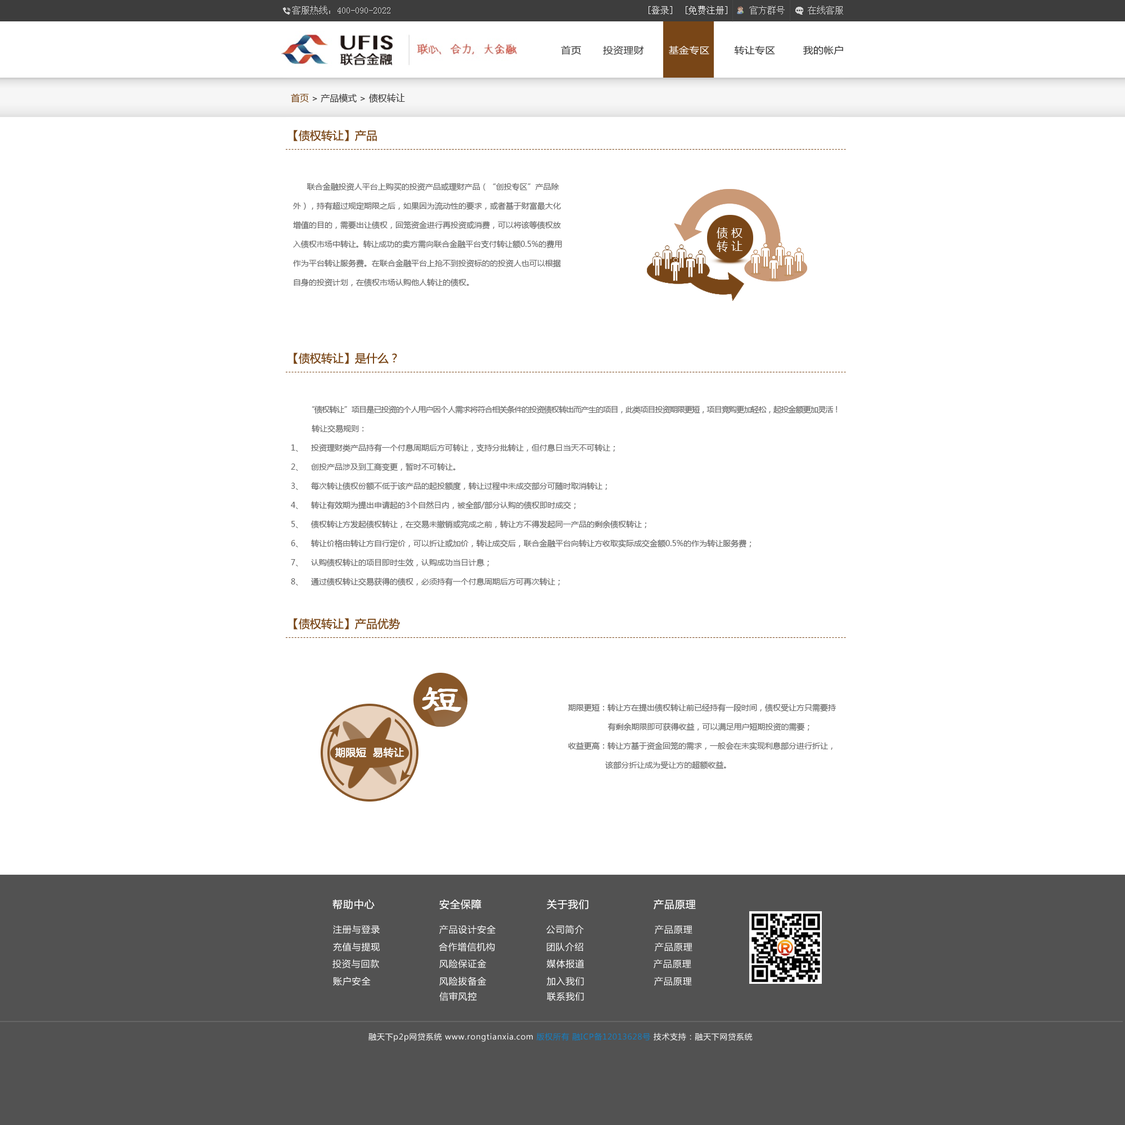
<style>
.page{position:relative;width:1125px;height:1125px;background:#ffffff}
.page>*{position:absolute;margin:0}
.t1{font:9px "SimSun";color:#d6d6d6}
.t2{font:9px "SimSun";color:#fefefe}
.t3{font:9px "SimSun";color:#fffefe}
.t4{font:9.1px "MicrosoftYaHei";letter-spacing:0.01em;color:#333333;scale:1.11 1}
.t5{font:9.1px "MicrosoftYaHei";letter-spacing:0.01em;color:#fffefe;scale:1.11 1}
.t6{font:9px "MicrosoftYaHei";color:#3b3a3a}
.t7{font:9px "MicrosoftYaHei";color:#794617}
.t8{font:11.2px "MicrosoftYaHei";color:#794617}
.t9{font:7.9px/19.1px "MicrosoftYaHei";color:#666666}
.t10{font:7.9px/19.1px "MicrosoftYaHei";letter-spacing:-0.04em;color:#666666}
.t11{font:11.2px/13.5px "MicrosoftYaHei";color:#ffffff}
.t12{font:7.9px/19.1px "MicrosoftYaHei";letter-spacing:-0.06em;color:#666666}
.t13{font:39.4px "-G-l-e-i-0-0-b";color:#ffffff;font-weight:bold}
.t14{font:10.1px "MicrosoftYaHei";color:#ffffff;font-weight:bold}
.t15{font:10.1px "MicrosoftYaHei";letter-spacing:0.05em;color:#ffffff}
.t16{font:9px "MicrosoftYaHei";letter-spacing:0.05em;color:#ffffff}
.t17{font:7.9px "MicrosoftYaHei";letter-spacing:0.05em;color:#ffffff}
.t18{font:7.9px "MicrosoftYaHei";letter-spacing:0.05em;color:#147fc3}
</style>
<div class="page">
<p class="t1" style="left:292px;top:6px;width:98px;height:9px">客服热线：400-090-2022</p>
<p class="t2" style="left:649px;top:6px;width:23px;height:9px">[登录]</p>
<p class="t3" style="left:686px;top:6px;width:41px;height:9px">[免费注册]</p>
<p class="t1" style="left:749px;top:6px;width:94px;height:9px">官方群号     在线客服</p>
<p class="t4" style="left:561px;top:46px;width:282px;height:9px">首页       投资理财        <span class="t5">基金专区</span>        转让专区         我的帐户</p>
<p class="t6" style="left:291px;top:93px;width:114px;height:10px"><span class="t7">首页 </span>&gt; 产品模式 &gt; 债权转让</p>
<p class="t8" style="left:294px;top:130px;width:83px;height:11px">【债权转让】产品</p>
<p class="t9" style="left:293px;top:183px;width:269px;height:104px">联合金融投资人平台上购买的投资产品或理财产品（“创投专区”产品除<br>外），持有超过规定期限之后，如果因为流动性的要求，或者基于财富最大化<br>增值的目的，需要出让债权，回笼资金进行再投资或消费，可以将该等债权放<br>入债权市场中转<span class="t10">让。转</span>让成功的卖方需向联合金融平台支付转让额0.5%的费用<br>作为平台转让服务费。在联合金融平台上抢不到投资标的的投资人也可以根据<br>自身的投资计划，在债权市场认购他人转让的债权。</p>
<p class="t11" style="left:717px;top:227px;width:25px;height:25px">债 权<br>转 让</p>
<p class="t8" style="left:294px;top:353px;width:103px;height:11px">【债权转让】是什么？</p>
<p class="t9" style="left:291px;top:406px;width:547px;height:180px"><span class="t12">“债权转让”项目是已投资的个人用户因个人需求将符合相关条件的投资债权转出而产生的项目，此类项目投资期限更短，项目竞购更加轻松，起投金额更加灵活！<br></span>         转让交易规则：<br>1、 投资理财类产品持有一个付息周期后方可转让，支持分批转让，但付息日当天不可转让；<br>2、 创投产品涉及到工商变更，暂时不可转让。<br>3、 每次转让债权份额不低于该产品的起投额度，转让过程中未成交部分可随时取消转让；<br>4、 转让有效期为提出申请起的3个自然日内，被全部/部分认购的债权即时成交；<br>5、 债权转让方发起债权转让，在交易未撤销或完成之前，转让方不得发起同一产品的剩余债权转让；<br>6、 转让价格由转让方自行定价，可以折让或加价，转让成交后，联合金融平台向转让方收取实际成交金额0.5%的作为转让服务费；<br>7、 认购债权转让的项目即时生效，认购成功当日计息；<br>8、 通过债权转让交易获得的债权，必须持有一个付息周期后方可再次转让；</p>
<p class="t8" style="left:294px;top:618px;width:106px;height:11px">【债权转让】产品优势</p>
<p class="t13" style="left:422px;top:687px;width:39px;height:25px">短</p>
<p class="t9" style="left:568px;top:704px;width:268px;height:66px">期限更短：转让方在提出债权转让前已经持有一段时间，债权受让方只需要持<br>                 有剩余期限即可获得收益，可以满足用户短期投资的需要；<br>收益更高：转让方基于资金回笼的需求，一般会在未实现利息部分进行折让，<br>                该部分折让成为受让方的超额收益。</p>
<p class="t14" style="left:335px;top:747px;width:69px;height:11px">期限短  易转让</p>
<p class="t15" style="left:332px;top:899px;width:43px;height:11px">帮助中心</p>
<p class="t15" style="left:439px;top:899px;width:43px;height:11px">安全保障</p>
<p class="t15" style="left:547px;top:899px;width:41px;height:11px">关于我们</p>
<p class="t15" style="left:654px;top:899px;width:42px;height:11px">产品原理</p>
<p class="t16" style="left:333px;top:925px;width:47px;height:9px">注册与登录</p>
<p class="t16" style="left:439px;top:925px;width:57px;height:9px">产品设计安全</p>
<p class="t16" style="left:546px;top:925px;width:38px;height:9px">公司简介</p>
<p class="t16" style="left:655px;top:925px;width:37px;height:9px">产品原理</p>
<p class="t16" style="left:333px;top:942px;width:47px;height:10px">充值与提现</p>
<p class="t16" style="left:439px;top:942px;width:56px;height:10px">合作增信机构</p>
<p class="t16" style="left:547px;top:942px;width:36px;height:10px">团队介绍</p>
<p class="t16" style="left:655px;top:942px;width:37px;height:10px">产品原理</p>
<p class="t16" style="left:332px;top:959px;width:47px;height:10px">投资与回款</p>
<p class="t16" style="left:439px;top:959px;width:48px;height:10px">风险保证金</p>
<p class="t16" style="left:546px;top:959px;width:38px;height:10px">媒体报道</p>
<p class="t16" style="left:654px;top:959px;width:37px;height:10px">产品原理</p>
<p class="t16" style="left:333px;top:976px;width:38px;height:10px">账户安全</p>
<p class="t16" style="left:439px;top:976px;width:48px;height:10px">风险拔备金</p>
<p class="t16" style="left:547px;top:976px;width:37px;height:10px">加入我们</p>
<p class="t16" style="left:654px;top:976px;width:38px;height:10px">产品原理</p>
<p class="t16" style="left:439px;top:992px;width:38px;height:9px">信审风控</p>
<p class="t16" style="left:547px;top:992px;width:37px;height:9px">联系我们</p>
<p class="t17" style="left:368px;top:1033px;width:385px;height:9px">融天下p2p网贷系统 www.rongtianxia.com <span class="t18">版权所有 融ICP备12013628号</span> 技术支持：融天下网贷系统</p>
</div>
